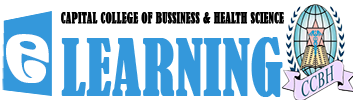
<style>
.page{position:relative;width:353px;height:100px;background:#ffffff}
.page>*{position:absolute;margin:0}
.t1{font:14px "BernardMT-Condensed";color:#000000;font-weight:bold;scale:0.81 1}
.t2{font:79.8px "Ravie";color:#ffffff;font-weight:bold;scale:0.74 1}
.t3{font:72px "BernardMT-Condensed";color:#3498db;font-weight:bold;scale:0.81 1}
</style>
<div class="page">
<p class="t1" style="left:61px;top:12px;width:223px;height:12px">CAPITAL COLLEGE OF BUSSINESS &amp; HEALTH SCIENCE</p>
<p class="t2" style="left:6px;top:34px;width:43px;height:49px;rotate:8deg">e</p>
<p class="t3" style="left:61px;top:37px;width:222px;height:60px">LEARNING</p>
</div>
